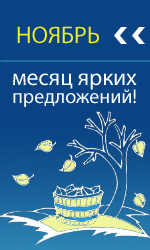
<style>
.page{position:relative;width:150px;height:250px;background:#094383}
.page>*{position:absolute;margin:0}
.t1{font:24px "MyriadPro-Regular";color:#edf122}
.t2{font:20px/18px "MyriadPro-Regular";color:#ffffff}
.t3{font:23px/18px "MyriadPro-Regular";color:#ffffff}
</style>
<div class="page">
<p class="t1" style="left:17px;top:26px;width:82px;height:18px">НОЯБРЬ</p>
<p class="t2" style="left:13px;top:73px;width:124px;height:34px"><span class="t3">месяц ярких <br></span>предложений!</p>
</div>
